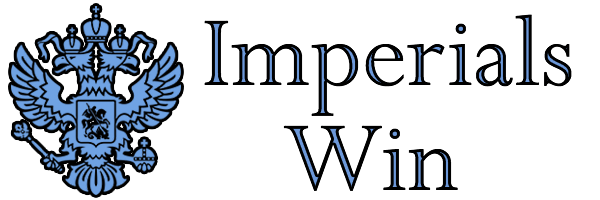
<style>
.page{position:relative;width:600px;height:200px;background:#ffffff}
.page>*{position:absolute;margin:0}
.t1{font:111.1px "Perpetua";color:#000000}
.t2{font:111.1px "Perpetua"}
</style>
<div class="page">
<p class="t1" style="left:204px;top:14px;width:368px;height:102px">Imperials</p>
<p class="t2" style="left:283px;top:125px;width:175px;height:66px">Win</p>
</div>
